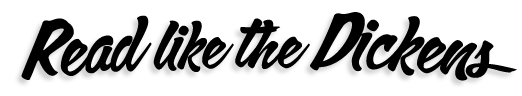
<style>
.page{position:relative;width:522px;height:96px;background:#ffffff}
.page>*{position:absolute;margin:0}
.t1{font:62px "CalgaryScriptOT";color:#000000}
.t2{font:72px "CalgaryScriptOT";color:#000000}
</style>
<div class="page">
<p class="t1" style="left:21px;top:12px;width:496px;height:69px"><span class="t2">Read </span>like the<span class="t2"> Dickens</span></p>
</div>
